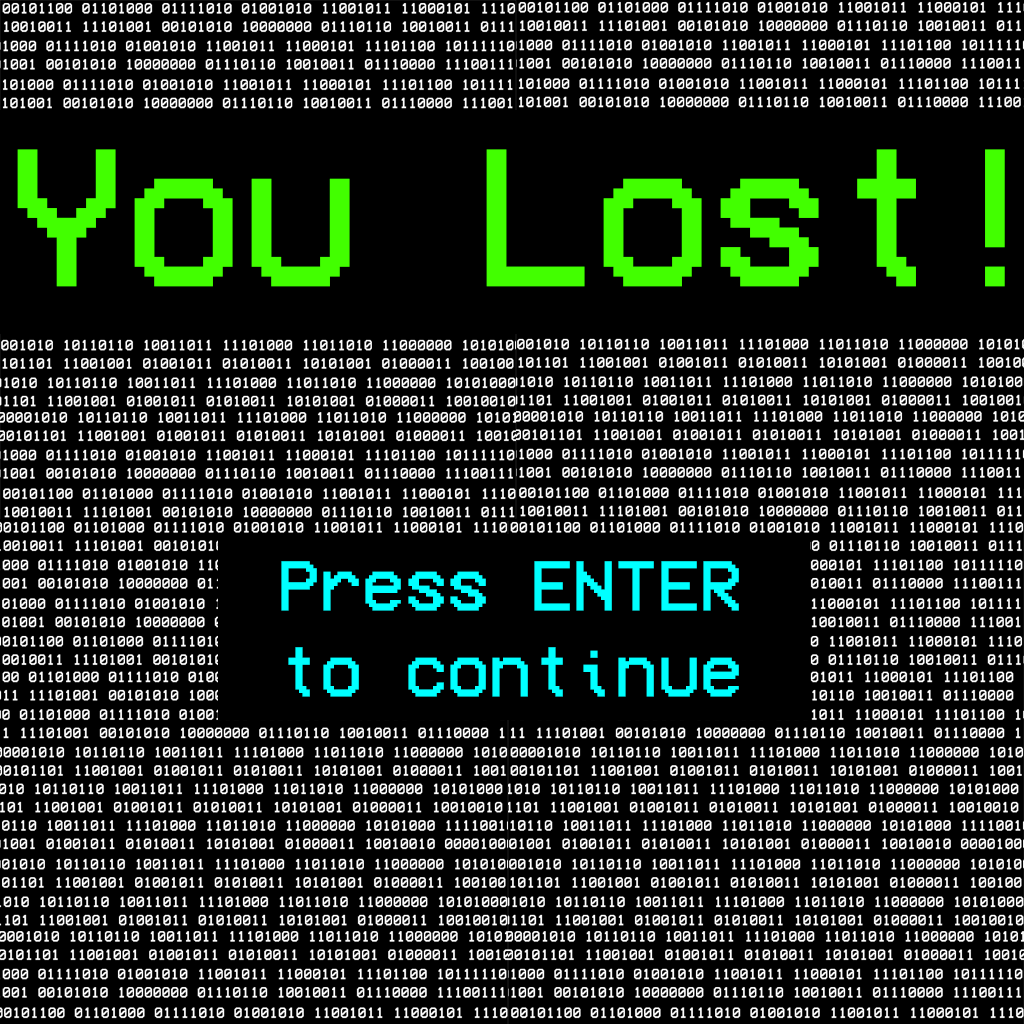
<style>
.page{position:relative;width:1024px;height:1024px;background:#000000}
.page>*{position:absolute;margin:0}
.t1{font:200px "VCROSDMono";color:#42ff00}
.t2{font:72px "VCROSDMono";color:#00ffff}
</style>
<div class="page">
<p class="t1" style="left:17px;top:149px;width:988px;height:138px">You Lost!</p>
<p class="t2" style="left:281px;top:561px;width:458px;height:136px;text-align:center">Press ENTER<br>to continue</p>
</div>
